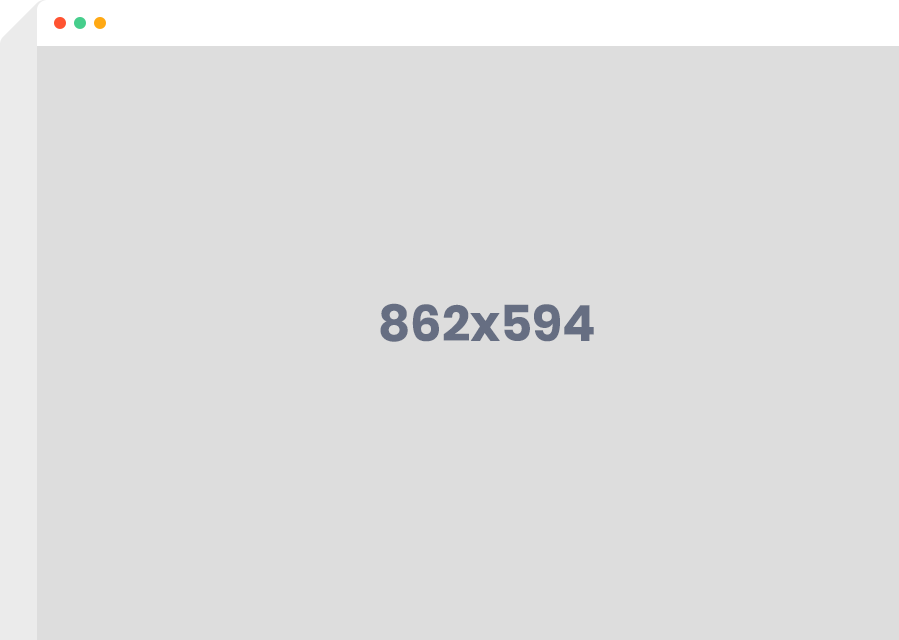
<style>
.page{position:relative;width:899px;height:640px;background:#dddddd}
.page>*{position:absolute;margin:0}
.t1{font:50px "Poppins-Bold";color:#666e82}
</style>
<div class="page">
<p class="t1" style="left:380px;top:303px;width:214px;height:39px">862x594</p>
</div>
